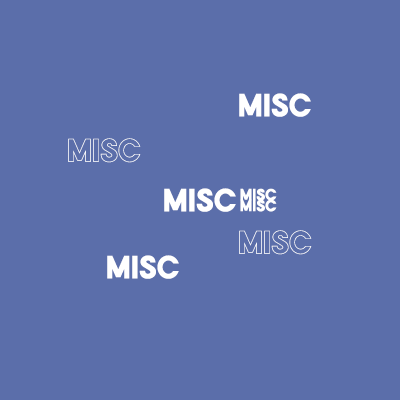
<style>
.page{position:relative;width:400px;height:400px;background:#5b6eaa}
.page>*{position:absolute;margin:0}
.t1{font:32.3px "Tokyo-Regular";color:#ffffff}
.t2{font:32.3px "Tokyo-Outline";color:#ffffff}
.t3{font:16.1px "Tokyo-Regular";color:#ffffff}
</style>
<div class="page">
<p class="t1" style="left:239px;top:93px;width:72px;height:24px">MISC</p>
<p class="t2" style="left:68px;top:138px;width:73px;height:25px">MISC</p>
<p class="t1" style="left:164px;top:188px;width:72px;height:24px">MISC</p>
<p class="t3" style="left:240px;top:188px;width:37px;height:13px">MISC</p>
<p class="t3" style="left:240px;top:199px;width:37px;height:13px">MISC</p>
<p class="t2" style="left:239px;top:230px;width:73px;height:25px">MISC</p>
<p class="t1" style="left:107px;top:255px;width:72px;height:24px">MISC</p>
</div>
